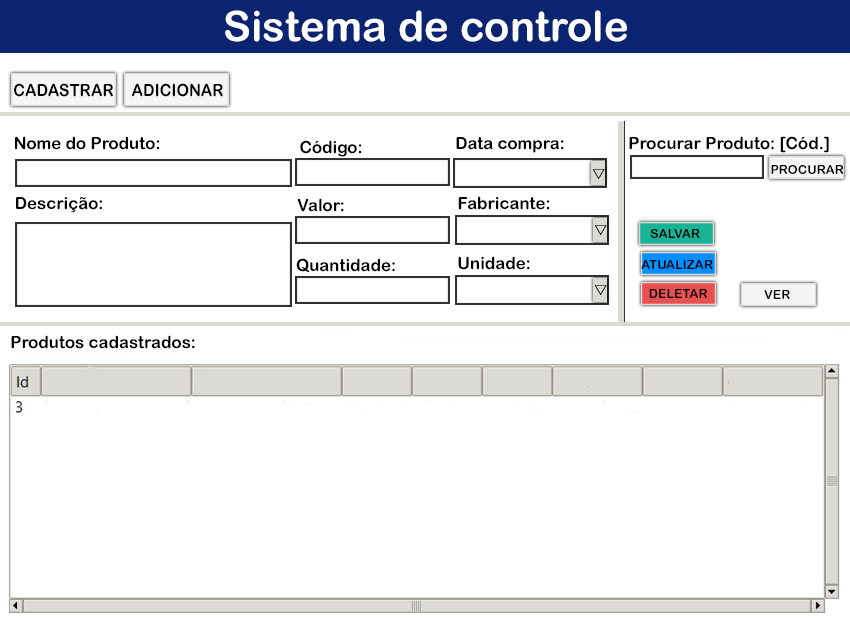
<style>
.page{position:relative;width:850px;height:620px;background:#ffffff}
.page>*{position:absolute;margin:0}
.t1{font:41.7px "ArialRoundedMTBold";letter-spacing:0.005em;color:#ffffff}
.t2{font:16.7px "ArialRoundedMTBold";letter-spacing:0.005em;color:#000000;scale:0.95 1}
.t3{font:16.7px "ArialRoundedMTBold";letter-spacing:0.005em;color:#000000}
.t4{font:12.5px "ArialRoundedMTBold";letter-spacing:0.005em;color:#000000}
</style>
<div class="page">
<p class="t1" style="left:225px;top:10px;width:402px;height:32px">Sistema de controle</p>
<p class="t2" style="left:14px;top:83px;width:99px;height:14px">CADASTRAR</p>
<p class="t2" style="left:132px;top:83px;width:91px;height:14px">ADICIONAR</p>
<p class="t3" style="left:15px;top:136px;width:145px;height:14px">Nome do Produto:</p>
<p class="t3" style="left:456px;top:137px;width:108px;height:16px">Data compra:</p>
<p class="t3" style="left:629px;top:136px;width:200px;height:17px">Procurar Produto: [Cód.]</p>
<p class="t3" style="left:300px;top:140px;width:62px;height:17px">Código:</p>
<p class="t4" style="left:771px;top:165px;width:73px;height:9px">PROCURAR</p>
<p class="t3" style="left:16px;top:196px;width:86px;height:17px">Descrição:</p>
<p class="t3" style="left:297px;top:198px;width:47px;height:14px">Valor:</p>
<p class="t3" style="left:458px;top:196px;width:92px;height:14px">Fabricante:</p>
<p class="t4" style="left:650px;top:229px;width:50px;height:9px">SALVAR</p>
<p class="t3" style="left:458px;top:256px;width:72px;height:14px">Unidade:</p>
<p class="t3" style="left:296px;top:258px;width:99px;height:15px">Quantidade:</p>
<p class="t4" style="left:641px;top:260px;width:72px;height:9px">ATUALIZAR</p>
<p class="t4" style="left:649px;top:289px;width:58px;height:9px">DELETAR</p>
<p class="t4" style="left:764px;top:290px;width:26px;height:9px">VER</p>
<p class="t3" style="left:11px;top:335px;width:184px;height:14px">Produtos cadastrados:</p>
</div>
